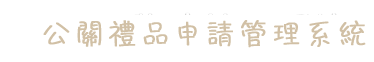
<style>
.page{position:relative;width:374px;height:62px;background:#ffffff}
.page>*{position:absolute;margin:0}
.t1{font:32px "DFTsai-W3-WINP-BF";color:#d1c0a5;font-weight:bold}
</style>
<div class="page">
<p class="t1" style="left:43px;top:20px;width:323px;height:28px">公關禮品申請管理系統</p>
</div>
